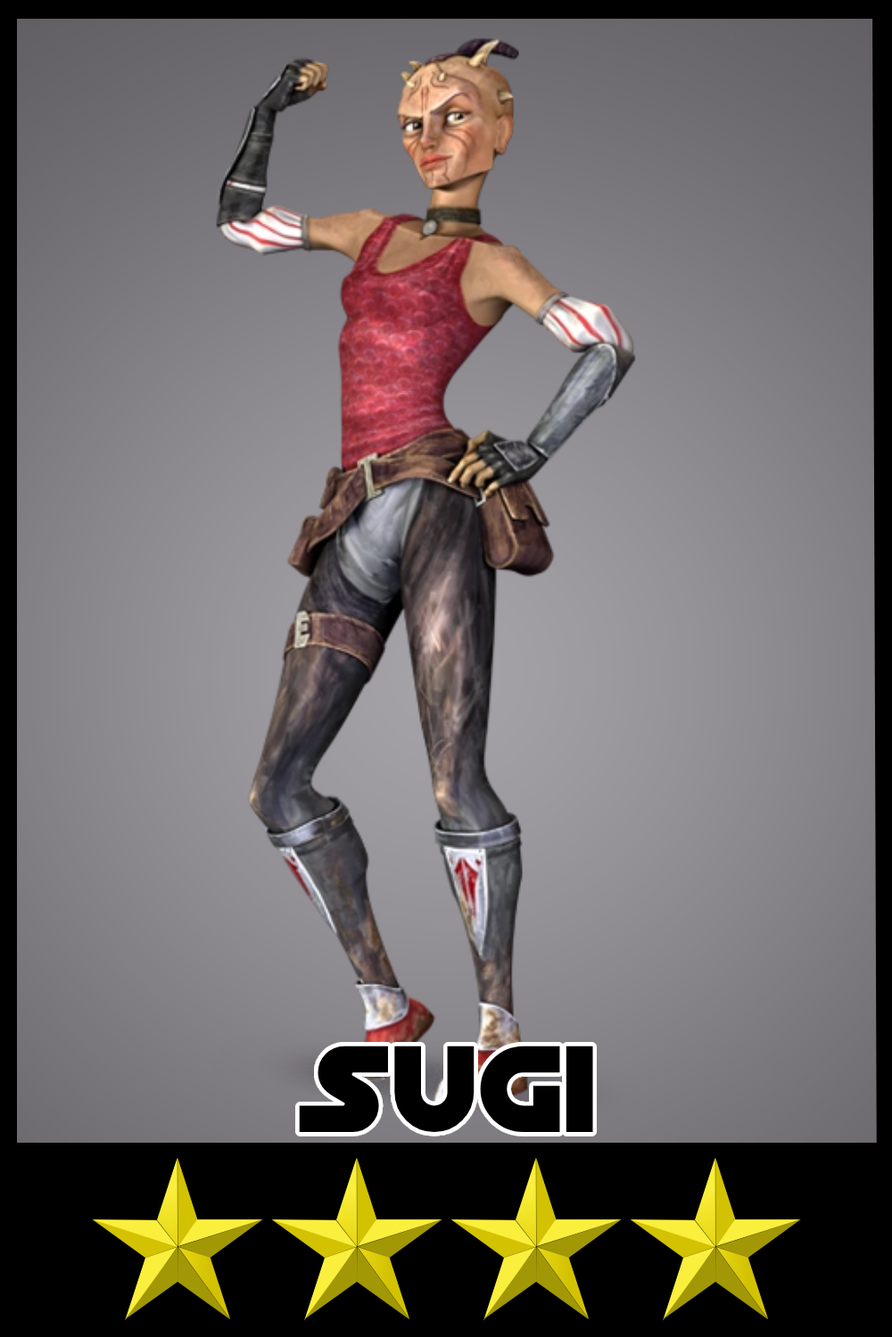
<style>
.page{position:relative;width:892px;height:1337px}
.page>*{position:absolute;margin:0}
.t1{font:132px "DistantGalaxy";color:#000000}
</style>
<div class="page">
<p class="t1" style="left:299px;top:1046px;width:294px;height:86px">Sugi</p>
</div>
